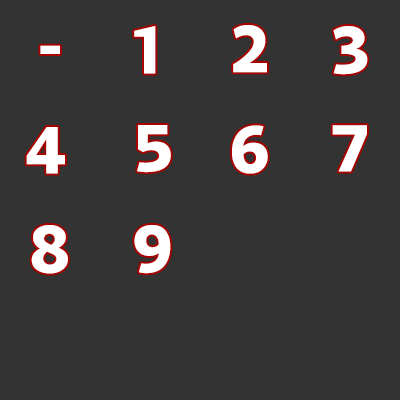
<style>
.page{position:relative;width:400px;height:400px;background:#333333}
.page>*{position:absolute;margin:0}
.t1{font:72px "SamoSansPro-Bold";color:#ffffff}
</style>
<div class="page">
<p class="t1" style="left:134px;top:26px;width:22px;height:48px">1</p>
<p class="t1" style="left:233px;top:25px;width:34px;height:48px">2</p>
<p class="t1" style="left:333px;top:26px;width:35px;height:49px">3</p>
<p class="t1" style="left:40px;top:45px;width:20px;height:9px">-</p>
<p class="t1" style="left:137px;top:125px;width:34px;height:48px">5</p>
<p class="t1" style="left:232px;top:125px;width:36px;height:49px">6</p>
<p class="t1" style="left:332px;top:125px;width:35px;height:47px">7</p>
<p class="t1" style="left:26px;top:127px;width:39px;height:47px">4</p>
<p class="t1" style="left:31px;top:225px;width:37px;height:49px">8</p>
<p class="t1" style="left:134px;top:225px;width:37px;height:49px">9</p>
</div>
